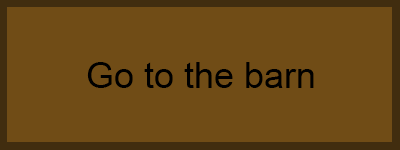
<style>
.page{position:relative;width:400px;height:150px;background:#704c16}
.page>*{position:absolute;margin:0}
.t1{font:36px "ArialMT";color:#000000}
</style>
<div class="page">
<p class="t1" style="left:87px;top:62px;width:227px;height:26px">Go to the barn</p>
</div>
